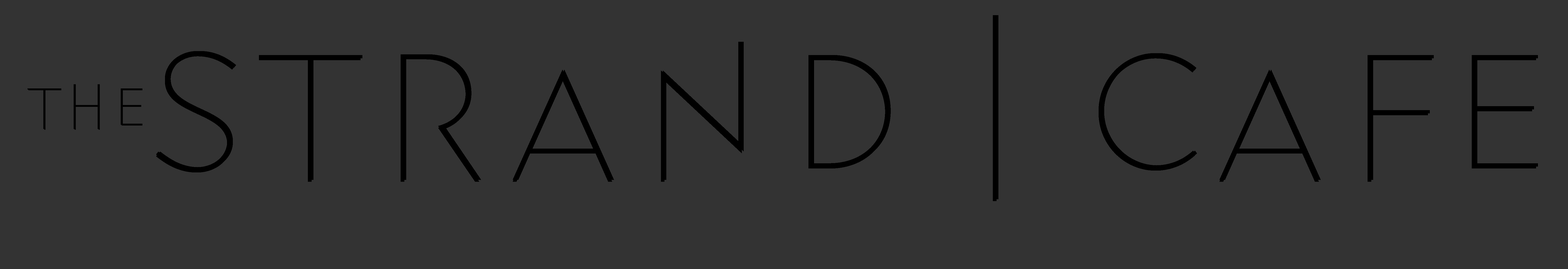
<style>
.page{position:relative;width:1568px;height:269px;background:#333333}
.page>*{position:absolute;margin:0}
.t1{font:194.2px "Baro-LineOne";color:#000000}
.t2{font:63.1px "Baro-LineOne";color:#000000}
</style>
<div class="page">
<p class="t1" style="left:156px;top:17px;width:1380px;height:184px">Strand | Cafe</p>
<p class="t1" style="left:156px;top:15px;width:1380px;height:184px">Strand | Cafe</p>
<p class="t1" style="left:158px;top:15px;width:1380px;height:184px">Strand | Cafe</p>
<p class="t2" style="left:28px;top:84px;width:113px;height:45px">the</p>
<p class="t2" style="left:28px;top:85px;width:114px;height:45px">the</p>
<p class="t2" style="left:28px;top:84px;width:114px;height:45px">the</p>
</div>
